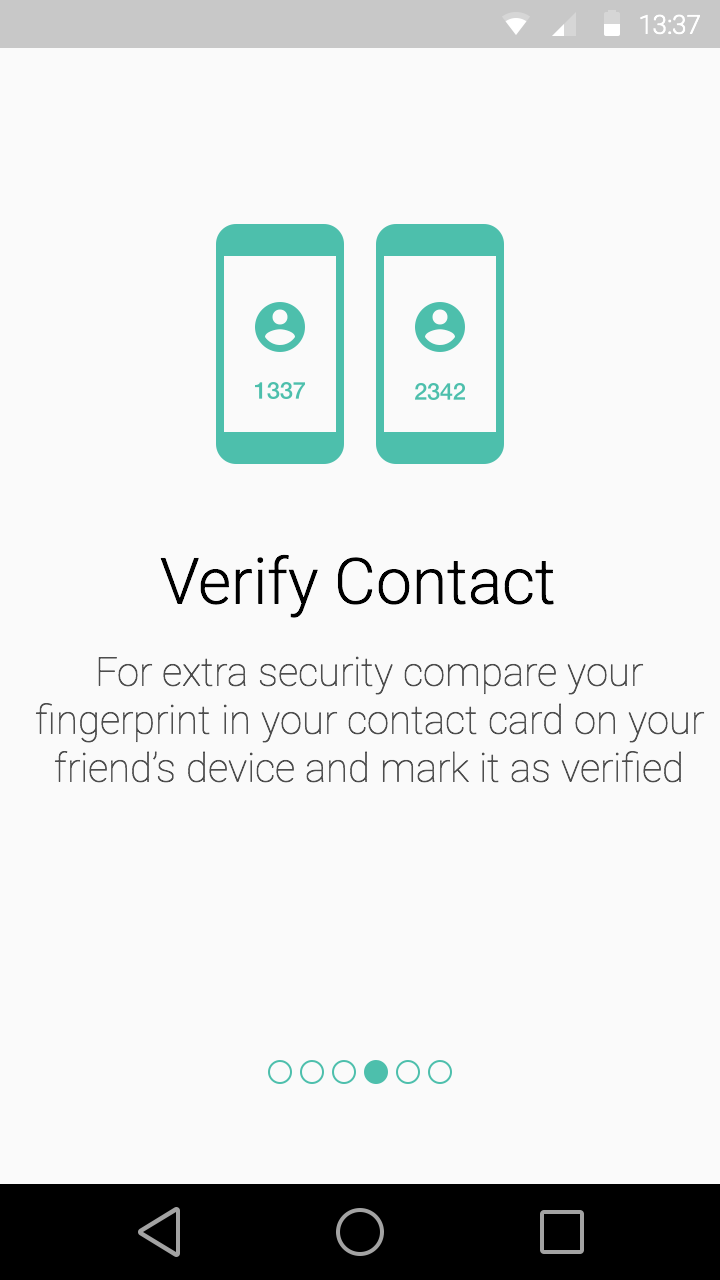
<style>
.page{position:relative;width:720px;height:1280px;background:#fafafa}
.page>*{position:absolute;margin:0}
.t1{font:26.1px "Roboto-Light";color:#ffffff}
.t2{font:64px "Roboto-Light";color:#000000}
.t3{font:40px/48px "Roboto-Thin";color:#4d4d4d}
</style>
<div class="page">
<p class="t1" style="left:640px;top:14px;width:60px;height:21px">13:37</p>
<p class="t2" style="left:160px;top:554px;width:394px;height:64px">Verify Contact</p>
<p class="t3" style="left:35px;top:656px;width:670px;height:127px;text-align:center">For extra security compare your<br>fingerprint in your contact card on your<br>friend’s device and mark it as verified</p>
</div>
